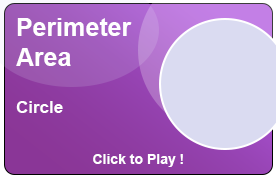
<style>
.page{position:relative;width:276px;height:177px;background:#dadbf1}
.page>*{position:absolute;margin:0}
.t1{font:25px "Arial-BoldMT";color:#ffffff}
.t2{font:17px "Arial-BoldMT";color:#ffffff}
.t3{font:14px "Arial-BoldMT";color:#ffffff}
</style>
<div class="page">
<p class="t1" style="left:16px;top:18px;width:116px;height:48px">Perimeter <br>Area</p>
<p class="t2" style="left:16px;top:101px;width:47px;height:12px">Circle</p>
<p class="t3" style="left:93px;top:154px;width:90px;height:13px">Click to Play !</p>
</div>
